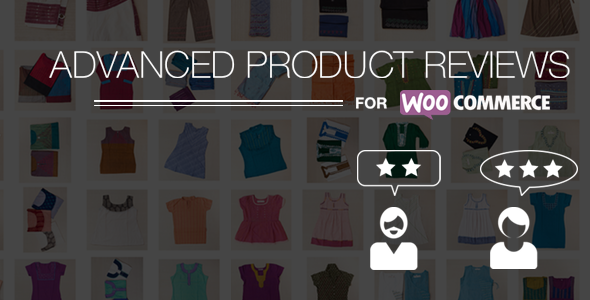
<style>
.page{position:relative;width:590px;height:300px;background:#454545}
.page>*{position:absolute;margin:0}
.t1{font:36.9px "HelveticaNeue-Thin";color:#ffffff}
.t2{font:15.4px "HelveticaNeue-Bold";color:#ffffff}
</style>
<div class="page">
<p class="t1" style="left:49px;top:50px;width:521px;height:28px">ADVANCED PRODUCT REVIEWS</p>
<p class="t2" style="left:356px;top:97px;width:31px;height:12px">FOR</p>
</div>
